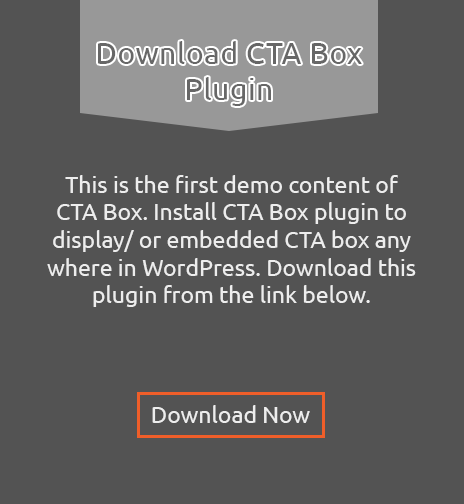
<style>
.page{position:relative;width:464px;height:504px;background:#535353}
.page>*{position:absolute;margin:0}
.t1{font:30px "Ubuntu";letter-spacing:0.02em;color:#676767}
.t2{font:23px "Ubuntu";color:#ededed}
</style>
<div class="page">
<p class="t1" style="left:98px;top:41px;width:264px;height:65px;text-align:center">Download CTA Box<br>Plugin</p>
<p class="t2" style="left:47px;top:175px;width:369px;height:132px;text-align:center">This is the first demo content of CTA Box. Install CTA Box plugin to display/ or embedded CTA box any where in WordPress. Download this plugin from the link below.</p>
<p class="t2" style="left:152px;top:405px;width:158px;height:18px">Download Now</p>
</div>
